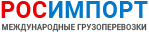
<style>
.page{position:relative;width:149px;height:32px;background:#ffffff}
.page>*{position:absolute;margin:0}
.t1{font:23.2px "Roboto-Bold";letter-spacing:0.02em;color:#0278cb;text-transform:uppercase}
.t2{font:23.2px "Roboto-Bold";letter-spacing:0.02em;color:#ef0000;text-transform:uppercase}
.t3{font:8.1px "Roboto-Medium";letter-spacing:0.02em;color:#4b4b4b;scale:0.93 1}
</style>
<div class="page">
<p class="t1" style="left:1px;top:1px;width:147px;height:17px"><span class="t2">рос</span>импорт</p>
<p class="t3" style="left:2px;top:23px;width:145px;height:9px">МЕЖДУНАРОДНЫЕ ГРУЗОПЕРЕВОЗКИ</p>
</div>
